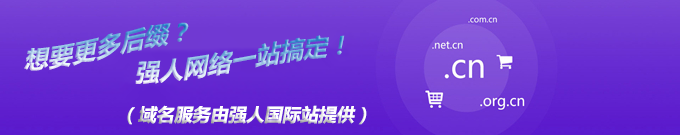
<style>
.page{position:relative;width:680px;height:135px}
.page>*{position:absolute;margin:0}
.t1{font:24px "MicrosoftYaHei-Bold";font-style:italic}
.t2{font:18px "MicrosoftYaHei-Bold";color:#ffffff;font-style:italic}
</style>
<div class="page">
<p class="t1" style="left:24px;top:22px;width:165px;height:49px">想要更多后缀？</p>
<p class="t1" style="left:135px;top:35px;width:210px;height:49px">强人网络一站搞定！</p>
<p class="t2" style="left:127px;top:105px;width:240px;height:20px">（域名服务由强人国际站提供）</p>
</div>
